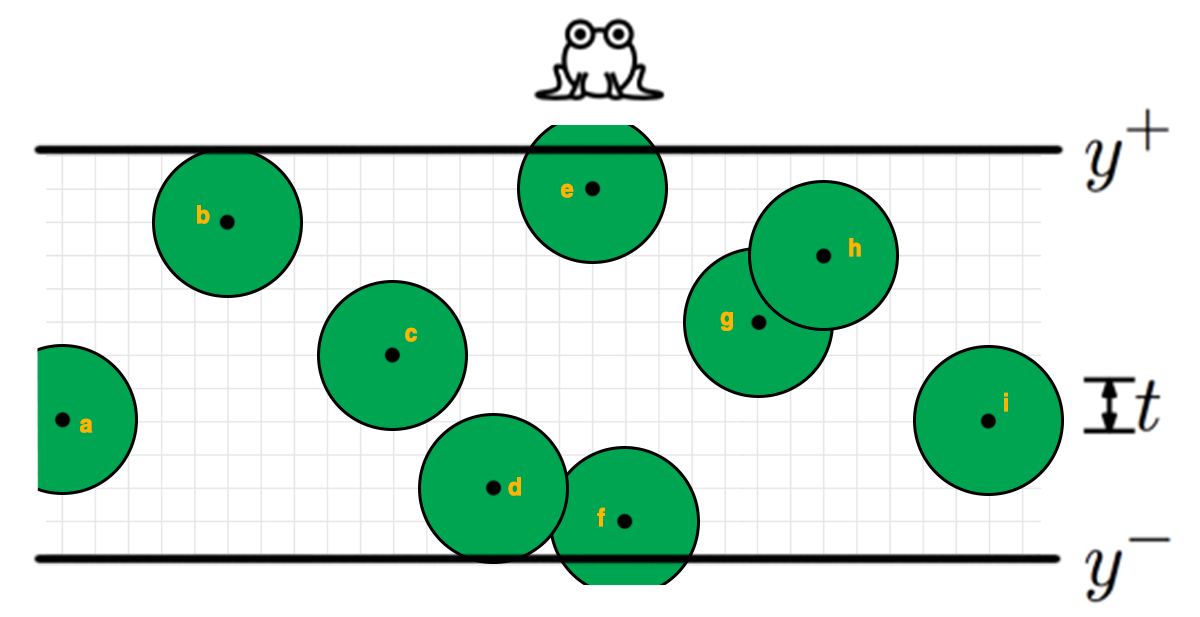
<style>
.page{position:relative;width:1200px;height:617px;background:#ffffff}
.page>*{position:absolute;margin:0}
.t1{font:25px "HelveticaCE-Bold";letter-spacing:0.1em;color:#ffb400;font-weight:bold;scale:0.9 1}
</style>
<div class="page">
<p class="t1" style="left:561px;top:183px;width:13px;height:15px">e</p>
<p class="t1" style="left:197px;top:205px;width:13px;height:19px">b</p>
<p class="t1" style="left:849px;top:238px;width:12px;height:19px">h</p>
<p class="t1" style="left:720px;top:311px;width:13px;height:20px">g</p>
<p class="t1" style="left:405px;top:327px;width:12px;height:15px">c</p>
<p class="t1" style="left:1004px;top:392px;width:4px;height:20px">i</p>
<p class="t1" style="left:80px;top:418px;width:13px;height:15px">a</p>
<p class="t1" style="left:508px;top:477px;width:13px;height:19px">d</p>
<p class="t1" style="left:597px;top:507px;width:8px;height:20px">f</p>
</div>
